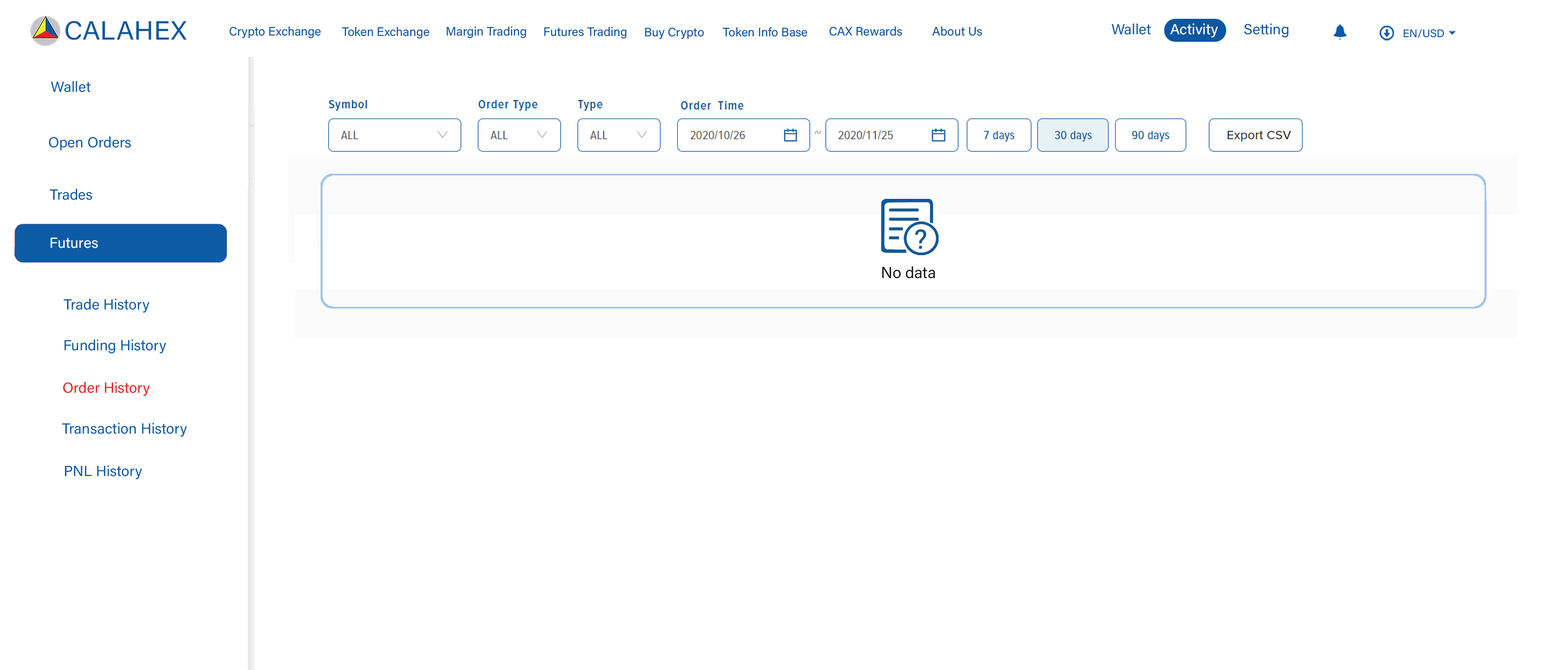
<style>
.page{position:relative;width:1568px;height:670px;background:#ffffff}
.page>*{position:absolute;margin:0}
.t1{font:26.4px "AcuminConcept-Regular";color:#0d57a0;font-style:italic}
.t2{font:12.2px "AcuminConcept-Regular";color:#0d57a0;font-style:italic}
.t3{font:11px "AcuminConcept-Regular";color:#055aaa;font-style:italic}
.t4{font:14.7px "AcuminConcept-Regular";color:#0d5ba6;font-style:italic}
.t5{font:14.7px "AcuminConcept-Regular";color:#ffffff;font-style:italic}
.t6{font:15.9px "AcuminConcept-Regular";color:#191b1b;font-style:italic}
.t7{font:14.7px "AcuminConcept-Regular";color:#eb1e23;font-style:italic}
</style>
<div class="page">
<p class="t1" style="left:65px;top:21px;width:122px;height:19px">CALAHEX</p>
<p class="t2" style="left:229px;top:26px;width:92px;height:12px">Crypto Exchange</p>
<p class="t2" style="left:342px;top:27px;width:87px;height:12px">Token Exchange</p>
<p class="t2" style="left:446px;top:26px;width:80px;height:12px">Margin Trading</p>
<p class="t2" style="left:544px;top:27px;width:82px;height:12px">Futures Trading</p>
<p class="t2" style="left:645px;top:27px;width:59px;height:12px">Buy Crypto</p>
<p class="t2" style="left:723px;top:27px;width:84px;height:10px">Token Info Base</p>
<p class="t2" style="left:829px;top:26px;width:73px;height:10px">CAX Rewards</p>
<p class="t2" style="left:932px;top:26px;width:50px;height:10px">About Us</p>
<p class="t3" style="left:1404px;top:29px;width:40px;height:9px">EN/USD</p>
<p class="t4" style="left:51px;top:81px;width:40px;height:11px">Wallet</p>
<p class="t4" style="left:49px;top:136px;width:82px;height:15px">Open Orders</p>
<p class="t4" style="left:50px;top:189px;width:42px;height:11px">Trades</p>
<p class="t5" style="left:51px;top:238px;width:47px;height:10px">Futures</p>
<p class="t6" style="left:882px;top:266px;width:53px;height:12px">No data</p>
<p class="t4" style="left:64px;top:298px;width:85px;height:15px">Trade History</p>
<p class="t4" style="left:64px;top:339px;width:102px;height:14px">Funding History</p>
<p class="t7" style="left:63px;top:382px;width:87px;height:14px">Order History</p>
<p class="t4" style="left:62px;top:422px;width:125px;height:15px">Transaction History</p>
<p class="t4" style="left:65px;top:465px;width:77px;height:14px">PNL History</p>
</div>
